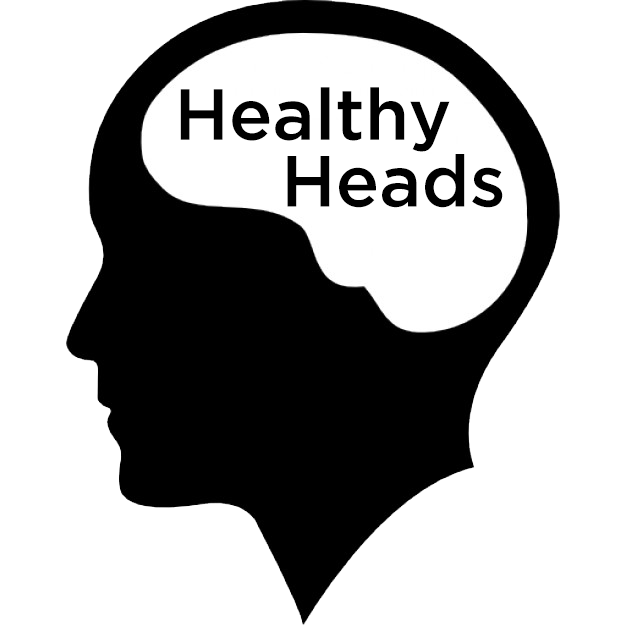
<style>
.page{position:relative;width:626px;height:626px;background:#ffffff}
.page>*{position:absolute;margin:0}
.t1{font:72px "GothamPro-Medium";color:#000000}
</style>
<div class="page">
<p class="t1" style="left:180px;top:87px;width:270px;height:65px">Healthy</p>
<p class="t1" style="left:287px;top:154px;width:216px;height:54px">Heads</p>
</div>
